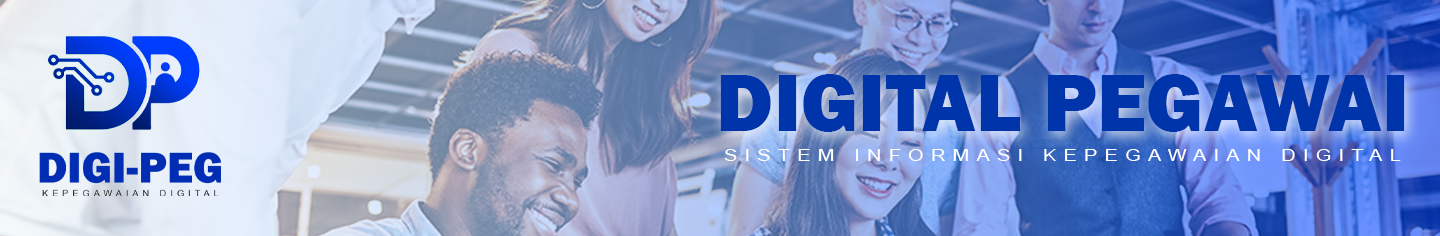
<style>
.page{position:relative;width:1440px;height:236px}
.page>*{position:absolute;margin:0}
.t1{font:84.5px "FranklinGothic-Heavy";color:#0034ab}
.t2{font:16px "ArialMT";letter-spacing:0.36em;color:#ffffff;scale:1.25 1}
</style>
<div class="page">
<p class="t1" style="left:720px;top:74px;width:685px;height:58px">DIGITAL PEGAWAI</p>
<p class="t2" style="left:724px;top:149px;width:677px;height:12px">SISTEM INFORMASI KEPEGAWAIAN DIGITAL</p>
</div>
